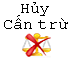
<style>
.page{position:relative;width:71px;height:58px;background:#ffffff}
.page>*{position:absolute;margin:0}
.t1{font:16px/16px "CourierNewPSMT";color:#000000}
</style>
<div class="page">
<p class="t1" style="left:4px;top:2px;width:64px;height:27px;text-align:center">Hủy<br>Cấn trừ</p>
</div>
